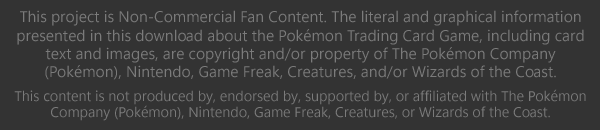
<style>
.page{position:relative;width:600px;height:130px;background:#333333}
.page>*{position:absolute;margin:0}
.t1{font:15.3px "SegoeUIVariable-SemilightSmall";color:#7b7b7b;font-weight:bold}
.t2{font:13.9px "SegoeUIVariable-SemilightSmall";color:#7b7b7b;font-weight:bold}
</style>
<div class="page">
<p class="t1" style="left:14px;top:10px;width:572px;height:111px;text-align:center">This project is Non-Commercial Fan Content. The literal and graphical information presented in this download about the Pokémon Trading Card Game, including card text and images, are copyright and/or property of The Pokémon Company (Pokémon), Nintendo, Game Freak, Creatures, and/or Wizards of the Coast.<br> <br><span class="t2">This content is not produced by, endorsed by, supported by, or affiliated with The Pokémon Company (Pokémon), Nintendo, Game Freak, Creatures, or Wizards of the Coast.</span></p>
</div>
